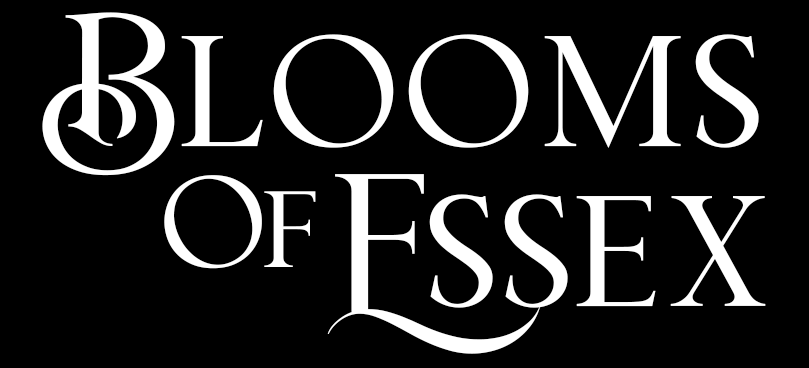
<style>
.page{position:relative;width:809px;height:368px;background:#000000}
.page>*{position:absolute;margin:0}
.t1{font:157.1px "Bricktown";color:#ffffff}
.t2{font:108.4px "Bricktown";color:#ffffff}
</style>
<div class="page">
<p class="t1" style="left:42px;top:12px;width:717px;height:164px">Blooms</p>
<p class="t1" style="left:327px;top:174px;width:439px;height:180px">Essex</p>
<p class="t2" style="left:164px;top:175px;width:152px;height:94px">Of</p>
</div>
